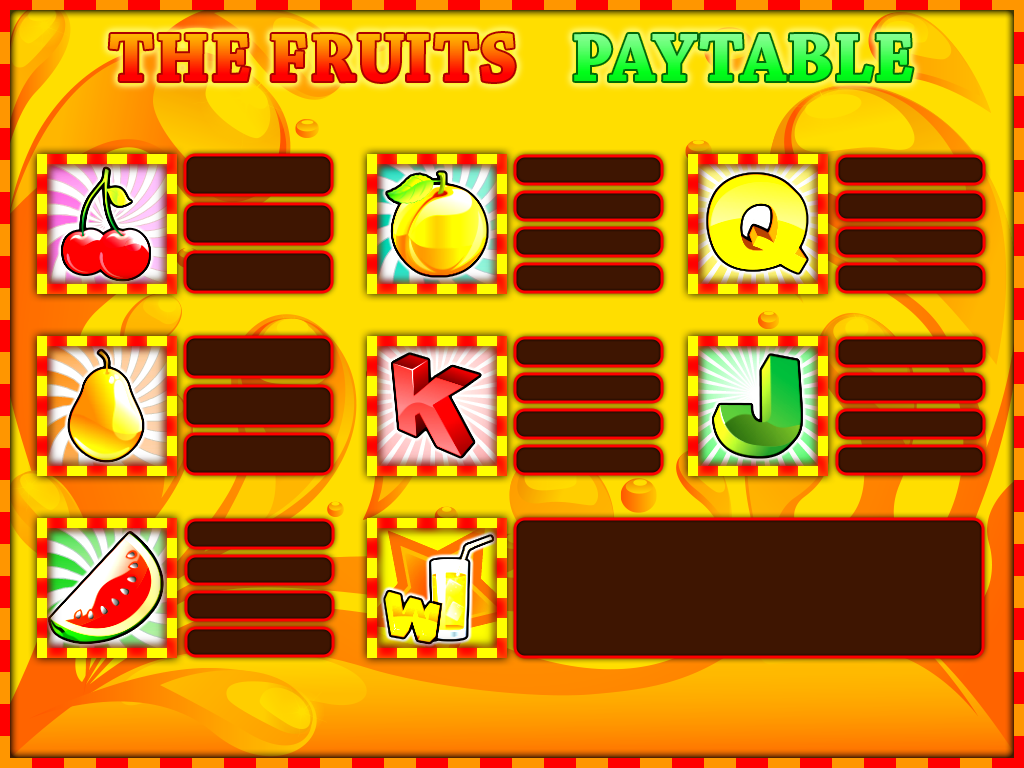
<style>
.page{position:relative;width:1024px;height:768px}
.page>*{position:absolute;margin:0}
.t1{font:72.2px "ChaparralPro-Bold";text-transform:uppercase}
</style>
<div class="page">
<p class="t1" style="left:109px;top:33px;width:406px;height:49px">THE FRUITS</p>
<p class="t1" style="left:574px;top:34px;width:339px;height:48px">PAYTABLE</p>
</div>
